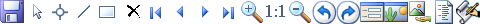
<style>
.page{position:relative;width:480px;height:24px;background:#ffffff}
.page>*{position:absolute;margin:0}
.t1{font:18px "TimesNewRomanPSMT";color:#4d6280}
</style>
<div class="page">
<p class="t1" style="left:266px;top:5px;width:19px;height:12px">1:1</p>
</div>
